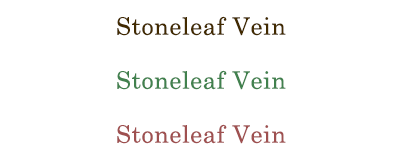
<style>
.page{position:relative;width:404px;height:162px;background:#ffffff}
.page>*{position:absolute;margin:0}
.t1{font:24px "CenturySchoolbook";letter-spacing:0.025em;color:#422a00}
.t2{font:24px "CenturySchoolbook";letter-spacing:0.025em;color:#41814e}
.t3{font:24px "CenturySchoolbook";letter-spacing:0.025em;color:#9f5050}
</style>
<div class="page">
<p class="t1" style="left:117px;top:16px;width:169px;height:20px">Stoneleaf Vein</p>
<p class="t2" style="left:117px;top:70px;width:169px;height:20px">Stoneleaf Vein</p>
<p class="t3" style="left:117px;top:124px;width:169px;height:20px">Stoneleaf Vein</p>
</div>
